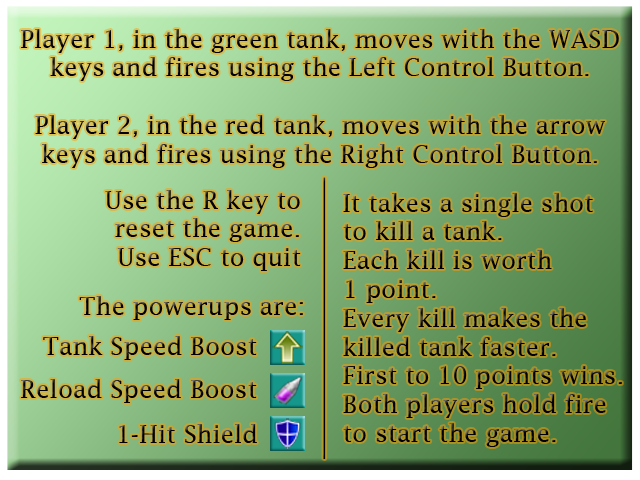
<style>
.page{position:relative;width:640px;height:480px}
.page>*{position:absolute;margin:0}
.t1{font:24px "LucidaFax";color:#000000}
</style>
<div class="page">
<p class="t1" style="left:21px;top:29px;width:598px;height:139px;text-align:center">Player 1, in the green tank, moves with the WASD keys and fires using the Left Control Button.<br><br>Player 2, in the red tank, moves with the arrow keys and fires using the Right Control Button.</p>
<p class="t1" style="left:105px;top:190px;width:196px;height:81px;text-align:right">Use the R key to reset the game.<br>Use ESC to quit</p>
<p class="t1" style="left:343px;top:193px;width:279px;height:254px">It takes a single shot<br>to kill a tank.<br>Each kill is worth<br>1 point.<br>Every kill makes the<br>killed tank faster.<br>First to 10 points wins.<br>Both players hold fire<br>to start the game.</p>
<p class="t1" style="left:79px;top:296px;width:224px;height:24px">The powerups are:</p>
<p class="t1" style="left:43px;top:336px;width:214px;height:24px">Tank Speed Boost</p>
<p class="t1" style="left:21px;top:379px;width:236px;height:24px">Reload Speed Boost</p>
<p class="t1" style="left:119px;top:424px;width:138px;height:19px">1-Hit Shield</p>
</div>
